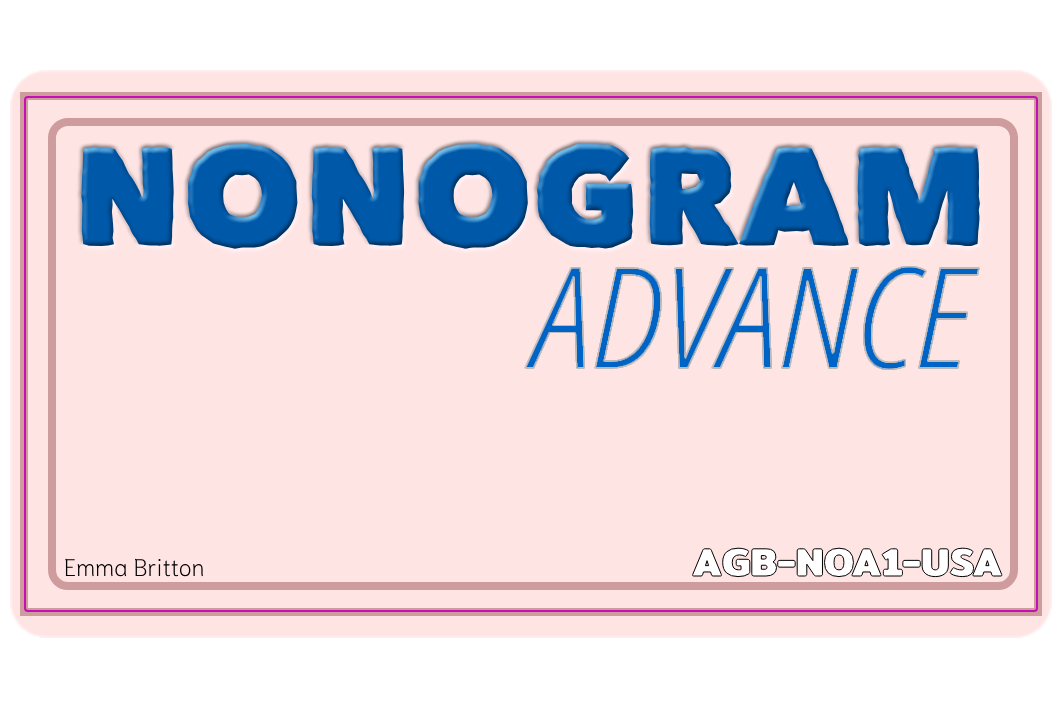
<style>
.page{position:relative;width:1062px;height:708px;background:#ffe4e4}
.page>*{position:absolute;margin:0}
.t1{font:140px "Matiz";color:#0058a8}
.t2{font:140px "NotoSans-CondensedLightItalic";color:#0063c6}
.t3{font:24px "Niramit-ExtraLight";color:#000000}
</style>
<div class="page">
<p class="t1" style="left:81px;top:144px;width:899px;height:105px">NONOGRAM</p>
<p class="t2" style="left:525px;top:266px;width:454px;height:104px">ADVANCE</p>
<p class="t3" style="left:65px;top:558px;width:139px;height:19px">Emma Britton</p>
</div>
